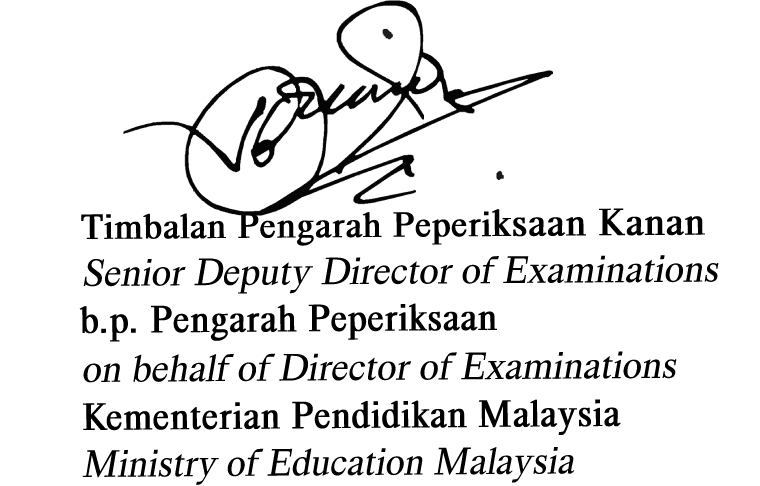
<style>
.page{position:relative;width:760px;height:486px;background:#ffffff}
.page>*{position:absolute;margin:0}
.t1{font:37.2px "HappyTimesattheIKOB-Regular";color:#000000;font-weight:bold}
.t2{font:40.3px "HappyTimesattheIKOB-Regular";color:#000000;font-weight:bold}
.t3{font:40.3px "HappyTimesattheIKOB-Regular";color:#000000;font-style:italic}
.t4{font:40.3px "HappyTimesattheIKOB-Regular";color:#000000;font-weight:bold;scale:0.92 1}
.t5{font:40.3px "HappyTimesattheIKOB-Regular";color:#000000;font-style:italic;scale:0.96 1}
</style>
<div class="page">
<p class="t1" style="left:81px;top:208px;width:624px;height:38px">Timbalan Pengarah Peperi<span class="t2">ksaan Kanan</span></p>
<p class="t3" style="left:83px;top:255px;width:636px;height:39px">Senior Deputy Director of Examinations</p>
<p class="t4" style="left:79px;top:303px;width:418px;height:39px">b.p. Pengarah Peperiksaan</p>
<p class="t3" style="left:82px;top:351px;width:595px;height:32px">on behalf of Director of Examinations</p>
<p class="t4" style="left:83px;top:399px;width:538px;height:36px">Kementerian Pendidikan Malaysia</p>
<p class="t5" style="left:82px;top:446px;width:493px;height:39px">Ministry of Education Malaysia</p>
</div>
